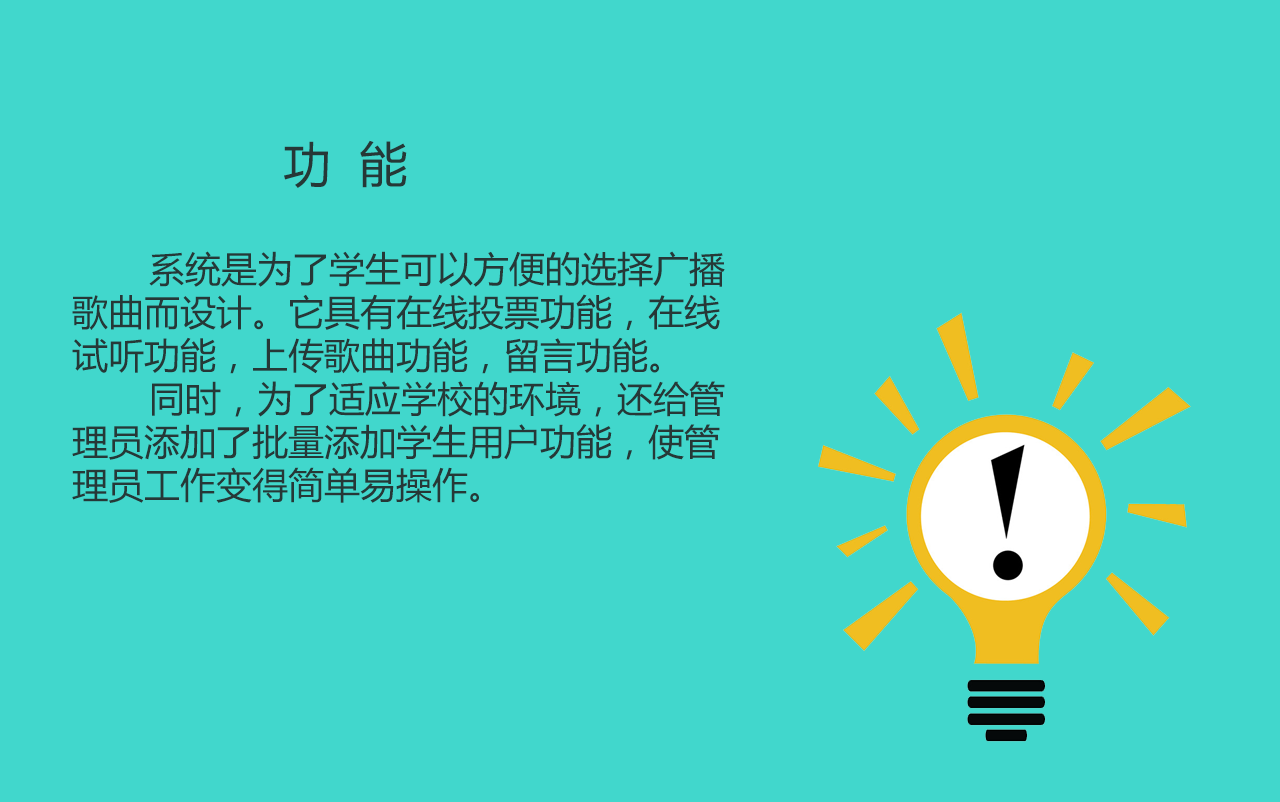
<style>
.page{position:relative;width:1280px;height:802px;background:#41d7cc}
.page>*{position:absolute;margin:0}
.t1{font:48px "MicrosoftYaHei";color:#263837}
.t2{font:36px "MicrosoftYaHei";color:#263837}
</style>
<div class="page">
<p class="t1" style="left:284px;top:140px;width:123px;height:48px">功  能</p>
<p class="t2" style="left:72px;top:251px;width:653px;height:252px">系统是为了学生可以方便的选择广播<br>歌曲而设计。它具有在线投票功能，在线<br>试听功能，上传歌曲功能，留言功能。<br>       同时，为了适应学校的环境，还给管<br>理员添加了批量添加学生用户功能，使管<br>理员工作变得简单易操作。</p>
</div>
